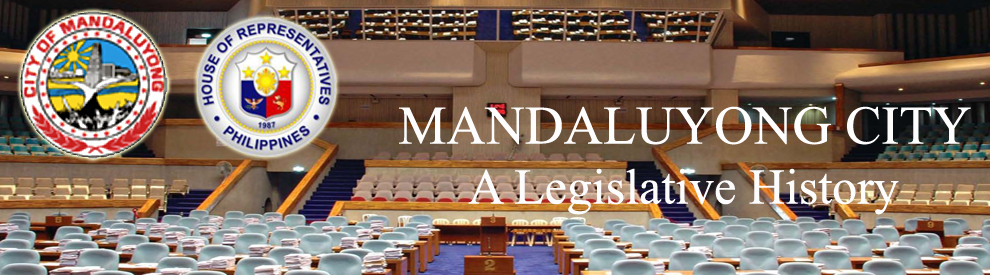
<style>
.page{position:relative;width:990px;height:275px}
.page>*{position:absolute;margin:0}
.t1{font:50px "TimesNewRomanPSMT";color:#fdfcfc}
.t2{font:54.2px "TimesNewRomanPSMT";color:#fdfdfd}
</style>
<div class="page">
<p class="t1" style="left:399px;top:106px;width:572px;height:109px;text-align:center"><span class="t2">MANDALUYONG CITY<br></span>A Legislative History</p>
</div>
